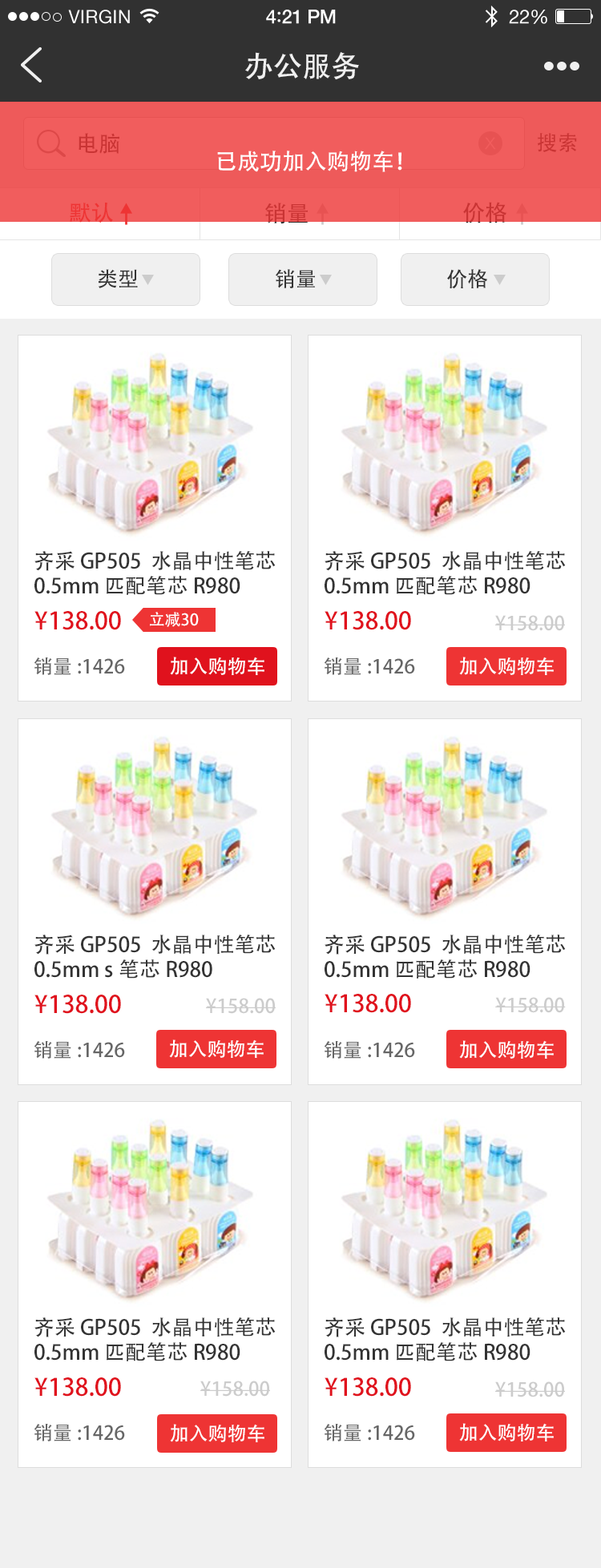
<style>
.page{position:relative;width:601px;height:1568px;background:#ffffff}
.page>*{position:absolute;margin:0}
.t1{font:28.8px "AdobeHeitiStd-Regular";color:#f0f0f0}
.t2{font:22.4px "AdobeHeitiStd-Regular";color:#c93434}
.t3{font:20.8px "AdobeHeitiStd-Regular";color:#c93434}
.t4{font:22.4px "AdobeHeitiStd-Regular";color:#ffffff}
.t5{font:22.4px "AdobeHeitiStd-Regular";color:#ee3434}
.t6{font:20.8px "AdobeHeitiStd-Regular";color:#333333}
.t7{font:20.8px/24.8px "AdobeHeitiStd-Regular";color:#333333}
.t8{font:24px "AdobeHeitiStd-Regular";color:#e0121d}
.t9{font:21.3px "AdobeHeitiStd-Regular";color:#e0121d;font-weight:bold}
.t10{font:16px "AdobeHeitiStd-Regular";color:#ffffff}
.t11{font:19.2px "AdobeHeitiStd-Regular";color:#cccccc}
.t12{font:21.3px "AdobeHeitiStd-Regular";color:#cccccc;font-weight:bold}
.t13{font:19.2px "AdobeHeitiStd-Regular";color:#666666}
.t14{font:19.2px "AdobeHeitiStd-Regular";color:#ffffff}
.t15{font:21.3px "AdobeHeitiStd-Regular";color:#cccccc}
</style>
<div class="page">
<p class="t1" style="left:245px;top:52px;width:114px;height:28px">办公服务</p>
<p class="t2" style="left:78px;top:133px;width:41px;height:21px">电脑</p>
<p class="t3" style="left:537px;top:133px;width:40px;height:19px">搜索</p>
<p class="t4" style="left:217px;top:151px;width:185px;height:21px">已成功加入购物车！</p>
<p class="t5" style="left:70px;top:202px;width:43px;height:21px">默认</p>
<p class="t2" style="left:265px;top:203px;width:43px;height:21px">销量</p>
<p class="t2" style="left:463px;top:202px;width:43px;height:21px">价格</p>
<p class="t6" style="left:99px;top:269px;width:39px;height:19px">类型</p>
<p class="t6" style="left:275px;top:269px;width:40px;height:19px">销量</p>
<p class="t6" style="left:447px;top:269px;width:40px;height:20px">价格</p>
<p class="t7" style="left:34px;top:551px;width:241px;height:44px">齐采 GP505  水晶中性笔芯<br>0.5mm 匹配笔芯R980</p>
<p class="t7" style="left:324px;top:551px;width:241px;height:44px">齐采 GP505  水晶中性笔芯<br>0.5mm 匹配笔芯R980</p>
<p class="t8" style="left:34px;top:611px;width:87px;height:19px"><span class="t9"> </span>¥138.00</p>
<p class="t10" style="left:150px;top:612px;width:49px;height:15px">立减30</p>
<p class="t8" style="left:324px;top:611px;width:87px;height:19px"><span class="t9"> </span>¥138.00</p>
<p class="t11" style="left:495px;top:615px;width:70px;height:16px"><span class="t12"> </span>¥158.00</p>
<p class="t13" style="left:34px;top:657px;width:91px;height:18px">销量:1426</p>
<p class="t14" style="left:170px;top:657px;width:94px;height:18px">加入购物车</p>
<p class="t13" style="left:324px;top:657px;width:91px;height:18px">销量:1426</p>
<p class="t14" style="left:459px;top:657px;width:94px;height:18px">加入购物车</p>
<p class="t7" style="left:34px;top:935px;width:241px;height:44px">齐采 GP505  水晶中性笔芯<br>0.5mm s笔芯R980</p>
<p class="t7" style="left:324px;top:935px;width:241px;height:44px">齐采 GP505  水晶中性笔芯<br>0.5mm 匹配笔芯R980</p>
<p class="t8" style="left:34px;top:995px;width:87px;height:19px"><span class="t9"> </span>¥138.00</p>
<p class="t11" style="left:206px;top:998px;width:69px;height:16px"><span class="t12"> </span>¥158.00</p>
<p class="t8" style="left:324px;top:994px;width:87px;height:19px">¥138.00</p>
<p class="t11" style="left:495px;top:997px;width:70px;height:16px"><span class="t15"> </span>¥158.00</p>
<p class="t13" style="left:34px;top:1040px;width:91px;height:19px">销量:1426</p>
<p class="t14" style="left:169px;top:1039px;width:94px;height:19px">加入购物车</p>
<p class="t13" style="left:324px;top:1040px;width:91px;height:19px">销量:1426</p>
<p class="t14" style="left:459px;top:1040px;width:94px;height:19px">加入购物车</p>
<p class="t7" style="left:34px;top:1317px;width:241px;height:44px">齐采 GP505  水晶中性笔芯<br>0.5mm 匹配笔芯R980</p>
<p class="t7" style="left:324px;top:1317px;width:241px;height:44px">齐采 GP505  水晶中性笔芯<br>0.5mm 匹配笔芯R980</p>
<p class="t8" style="left:34px;top:1377px;width:87px;height:20px"><span class="t9"> </span>¥138.00</p>
<p class="t11" style="left:200px;top:1381px;width:70px;height:16px"><span class="t12"> </span>¥158.00</p>
<p class="t8" style="left:324px;top:1377px;width:87px;height:20px"><span class="t9"> </span>¥138.00</p>
<p class="t11" style="left:495px;top:1381px;width:70px;height:16px"><span class="t12"> </span>¥158.00</p>
<p class="t13" style="left:34px;top:1423px;width:91px;height:18px">销量:1426</p>
<p class="t14" style="left:170px;top:1424px;width:94px;height:18px">加入购物车</p>
<p class="t13" style="left:324px;top:1423px;width:91px;height:18px">销量:1426</p>
<p class="t14" style="left:459px;top:1423px;width:94px;height:18px">加入购物车</p>
</div>
